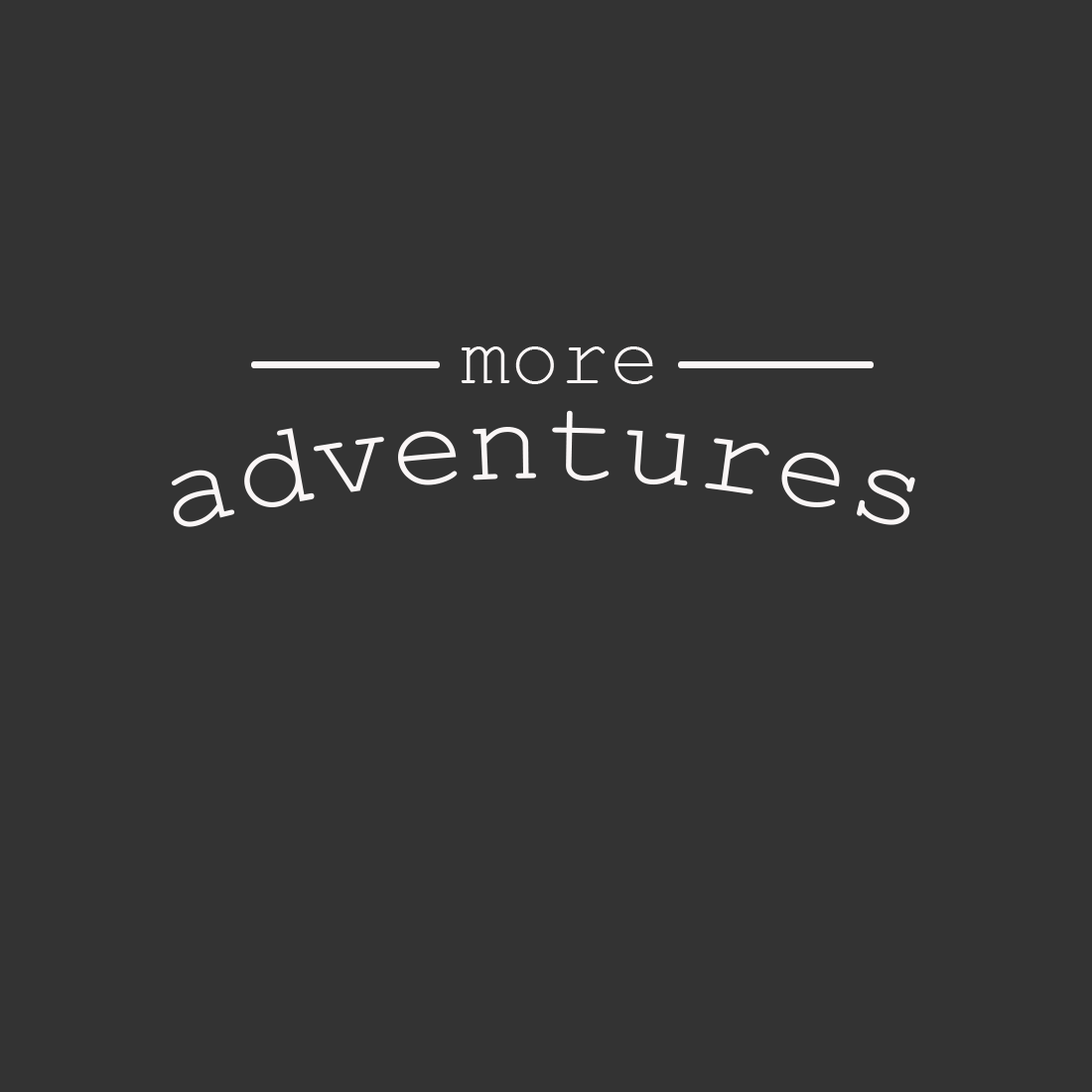
<style>
.page{position:relative;width:1092px;height:1092px;background:#333333}
.page>*{position:absolute;margin:0}
.t1{font:84.4px "CourierNewPSMT";color:#faf6f6}
.t2{font:117.2px "CourierNewPSMT";color:#faf6f6}
</style>
<div class="page">
<p class="t1" style="left:461px;top:346px;width:192px;height:38px">more</p>
<p class="t2" style="left:171px;top:410px;width:744px;height:117px">adventures</p>
</div>
